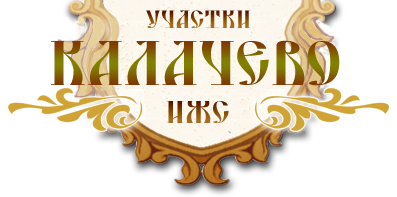
<style>
.page{position:relative;width:397px;height:197px;background:#ffffff}
.page>*{position:absolute;margin:0}
.t1{font:24px "DSYermak_D"}
.t2{font:60px "DSYermak_D"}
.t3{font:30px "DSYermak_D"}
</style>
<div class="page">
<p class="t1" style="left:146px;top:10px;width:105px;height:18px">УЧАСТКИ</p>
<p class="t2" style="left:51px;top:40px;width:289px;height:46px">КАЛАЧЕВО</p>
<p class="t3" style="left:166px;top:101px;width:63px;height:22px">ИЖС</p>
</div>
